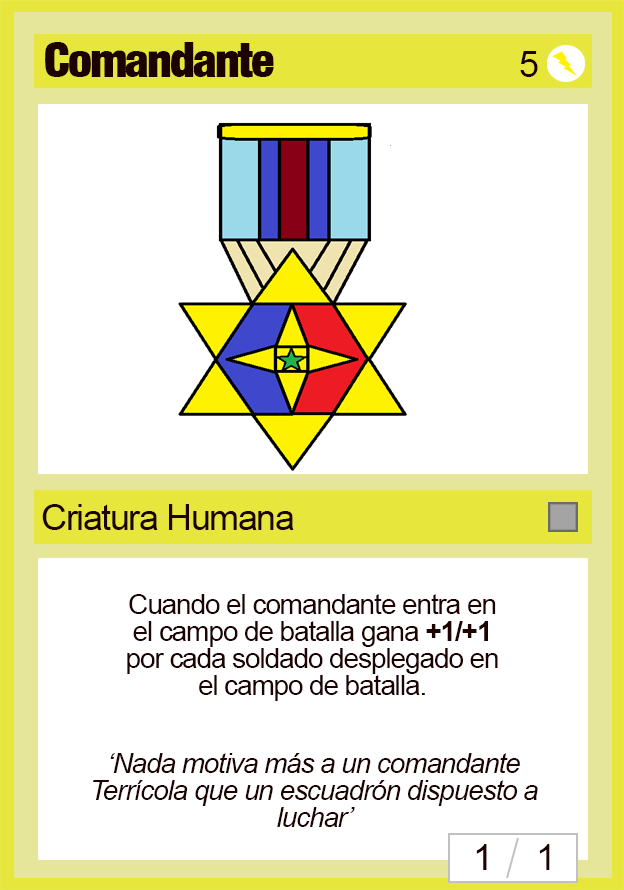
<style>
.page{position:relative;width:624px;height:890px;background:#ffffff}
.page>*{position:absolute;margin:0}
.t1{font:48px "Harvest";letter-spacing:-0.04em;color:#1d0202}
.t2{font:36px "ArialMT";letter-spacing:-0.04em;color:#1d0202}
.t3{font:28px/27px "ArialMT";letter-spacing:-0.04em;color:#1d0202}
.t4{font:28px/27px "Arial-BoldMT";letter-spacing:-0.04em;color:#1d0202}
.t5{font:28px/27px "Arial-ItalicMT";letter-spacing:-0.04em;color:#1d0202}
</style>
<div class="page">
<p class="t1" style="left:45px;top:42px;width:229px;height:36px">Comandante</p>
<p class="t2" style="left:520px;top:51px;width:18px;height:26px">5</p>
<p class="t2" style="left:42px;top:504px;width:252px;height:26px">Criatura Humana</p>
<p class="t3" style="left:127px;top:594px;width:371px;height:107px;text-align:center">Cuando el comandante entra en el campo de batalla gana <span class="t4">+1/+1</span> por cada soldado desplegado en el campo de batalla.</p>
<p class="t5" style="left:93px;top:753px;width:445px;height:74px;text-align:center">‘Nada motiva más a un comandante Terrícola que un escuadrón dispuesto a luchar’</p>
<p class="t2" style="left:539px;top:844px;width:11px;height:26px">1</p>
</div>
